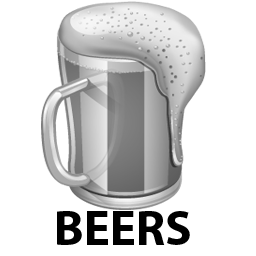
<style>
.page{position:relative;width:256px;height:256px;background:#ffffff}
.page>*{position:absolute;margin:0}
.t1{font:49px "MyriadPro-Bold";color:#000000}
</style>
<div class="page">
<p class="t1" style="left:57px;top:211px;width:133px;height:34px">BEERS</p>
</div>
